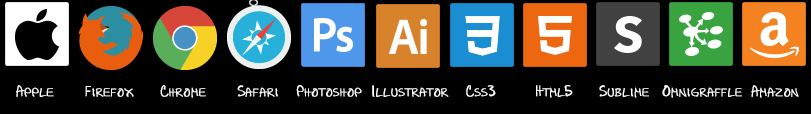
<style>
.page{position:relative;width:811px;height:114px;background:#000000}
.page>*{position:absolute;margin:0}
.t1{font:12px "AllCaps";color:#ffffff;font-weight:bold}
</style>
<div class="page">
<p class="t1" style="left:16px;top:85px;width:783px;height:13px">Apple       Firefox      Chrome       Safari    Photoshop  Illustrator    Css3         Html5      Sublime   Omnigraffle  Amazon</p>
</div>
